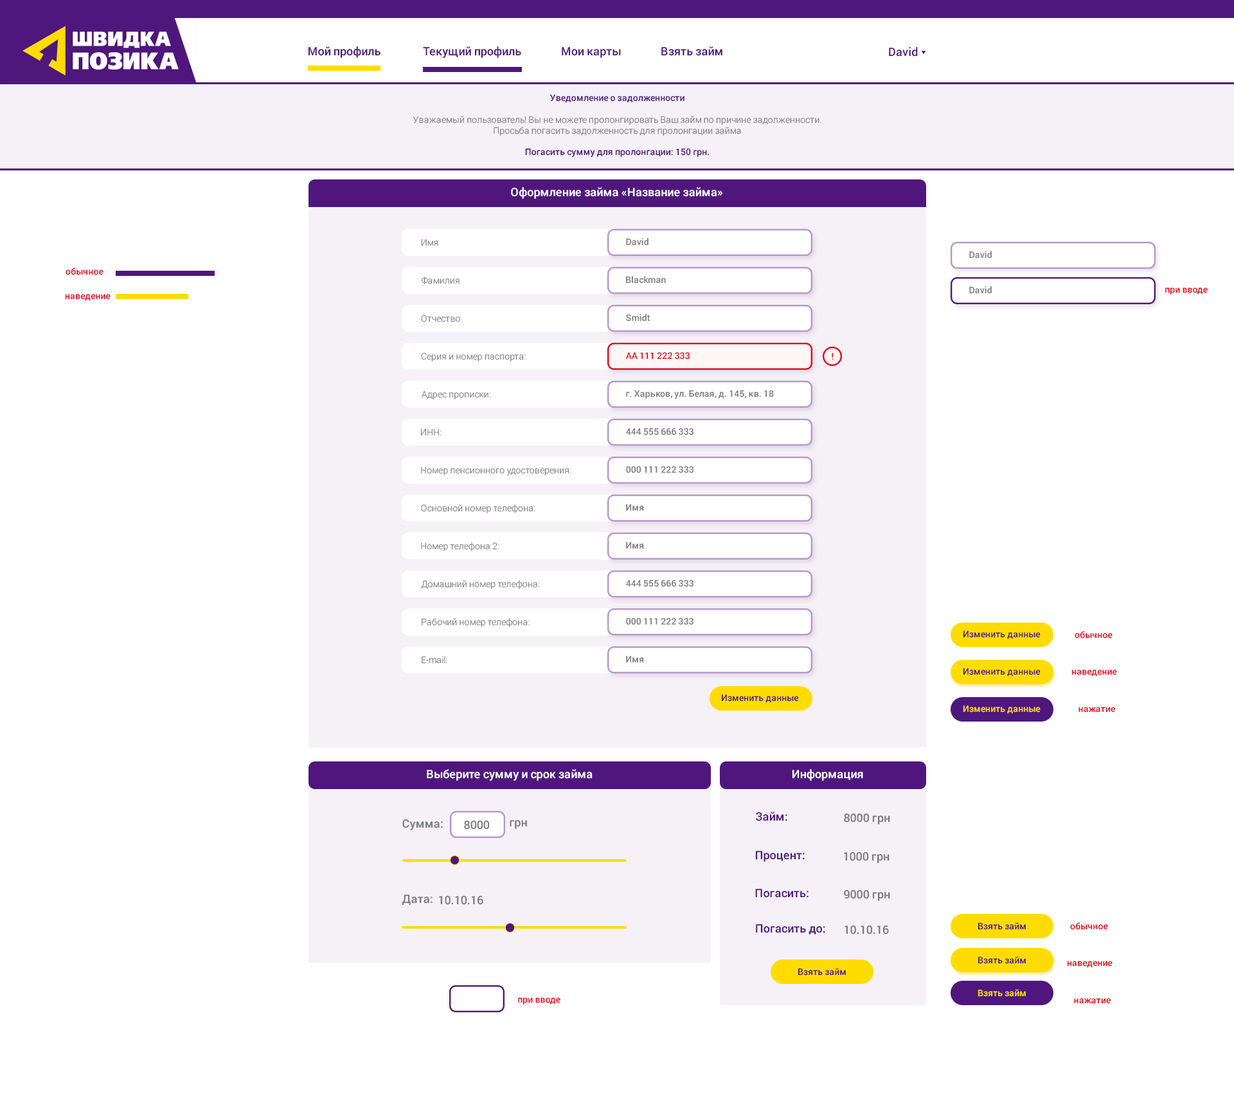
<style>
.page{position:relative;width:1234px;height:1101px;background:#ffffff}
.page>*{position:absolute;margin:0}
.t1{font:11.6px "Roboto-Medium";letter-spacing:0.005em;color:#4f177d}
.t2{font:9px "Roboto-Light";letter-spacing:0.005em;color:#7a7a7a}
.t3{font:9px "Roboto-Medium";letter-spacing:0.005em;color:#4f177d}
.t4{font:11.6px "Roboto-Medium";letter-spacing:0.005em;color:#ffffff}
.t5{font:9px "Roboto-Medium";letter-spacing:0.005em;color:#7a7a7a}
.t6{font:9px "Roboto-Medium";letter-spacing:0.005em;color:#e30613}
.t7{font:9px "Roboto-Medium";letter-spacing:0.005em;color:#ffdc00}
.t8{font:11.6px "Roboto-Medium";letter-spacing:0.005em;color:#7a7a7a}
</style>
<div class="page">
<p class="t1" style="left:308px;top:46px;width:415px;height:12px">Мой профиль                Текущий профиль               Мои карты               Взять займ</p>
<p class="t1" style="left:889px;top:47px;width:29px;height:10px">David</p>
<p class="t2" style="left:413px;top:94px;width:409px;height:64px;text-align:center"><span class="t3">Уведомление о задолженности<br></span><br>Уважаемый пользователь! Вы не можете пролонгировать Ваш займ по причине задолженности.<br>Просьба погасить задолженность для пролонгации займа<br><br><span class="t3">Погасить сумму для пролонгации: 150 грн.</span></p>
<p class="t4" style="left:511px;top:187px;width:212px;height:12px">Оформление займа «Название займа»</p>
<p class="t2" style="left:421px;top:239px;width:17px;height:7px">Имя</p>
<p class="t5" style="left:626px;top:238px;width:23px;height:8px">David</p>
<p class="t5" style="left:969px;top:251px;width:23px;height:7px">David</p>
<p class="t6" style="left:66px;top:267px;width:38px;height:8px">обычное</p>
<p class="t2" style="left:421px;top:276px;width:39px;height:8px">Фамилия</p>
<p class="t5" style="left:626px;top:276px;width:40px;height:8px">Blackman</p>
<p class="t6" style="left:65px;top:294px;width:46px;height:7px">наведение</p>
<p class="t5" style="left:969px;top:286px;width:23px;height:8px">David</p>
<p class="t6" style="left:1166px;top:287px;width:42px;height:7px">при вводе</p>
<p class="t2" style="left:421px;top:314px;width:39px;height:8px">Отчество</p>
<p class="t5" style="left:626px;top:314px;width:25px;height:7px">Smidt</p>
<p class="t2" style="left:421px;top:352px;width:105px;height:9px">Серия и номер паспорта:</p>
<p class="t6" style="left:626px;top:352px;width:64px;height:7px">AA 111 222 333</p>
<p class="t6" style="left:832px;top:352px;width:2px;height:8px">!</p>
<p class="t5" style="left:626px;top:390px;width:148px;height:9px">г. Харьков, ул. Белая, д. 145, кв. 18</p>
<p class="t2" style="left:422px;top:390px;width:69px;height:9px">Адрес прописки:</p>
<p class="t2" style="left:421px;top:428px;width:21px;height:8px">ИНН:</p>
<p class="t5" style="left:626px;top:428px;width:68px;height:7px">444 555 666 333</p>
<p class="t2" style="left:421px;top:466px;width:151px;height:10px">Номер пенсионного удостоверения:</p>
<p class="t5" style="left:626px;top:465px;width:68px;height:8px">000 111 222 333</p>
<p class="t2" style="left:421px;top:504px;width:115px;height:9px">Основной номер телефона:</p>
<p class="t5" style="left:626px;top:503px;width:18px;height:8px">Имя</p>
<p class="t2" style="left:421px;top:542px;width:79px;height:9px">Номер телефона 2:</p>
<p class="t5" style="left:626px;top:541px;width:18px;height:8px">Имя</p>
<p class="t2" style="left:421px;top:580px;width:119px;height:9px">Домашний номер телефона:</p>
<p class="t5" style="left:626px;top:579px;width:68px;height:8px">444 555 666 333</p>
<p class="t2" style="left:422px;top:618px;width:108px;height:9px">Рабочий номер телефона:</p>
<p class="t5" style="left:626px;top:617px;width:68px;height:8px">000 111 222 333</p>
<p class="t3" style="left:963px;top:630px;width:78px;height:9px">Изменить данные</p>
<p class="t6" style="left:1075px;top:631px;width:38px;height:7px">обычное</p>
<p class="t2" style="left:422px;top:656px;width:25px;height:7px">E-mail:</p>
<p class="t5" style="left:626px;top:655px;width:18px;height:8px">Имя</p>
<p class="t3" style="left:963px;top:667px;width:78px;height:9px">Изменить данные</p>
<p class="t6" style="left:1072px;top:669px;width:45px;height:7px">наведение</p>
<p class="t3" style="left:721px;top:694px;width:78px;height:9px">Изменить данные</p>
<p class="t7" style="left:963px;top:705px;width:78px;height:9px">Изменить данные</p>
<p class="t6" style="left:1079px;top:706px;width:37px;height:6px">нажатие</p>
<p class="t4" style="left:427px;top:769px;width:166px;height:11px">Выберите сумму и срок займа</p>
<p class="t4" style="left:792px;top:769px;width:71px;height:11px">Информация</p>
<p class="t8" style="left:402px;top:818px;width:41px;height:12px">Сумма:</p>
<p class="t8" style="left:464px;top:820px;width:26px;height:9px">8000</p>
<p class="t8" style="left:510px;top:820px;width:17px;height:9px">грн</p>
<p class="t1" style="left:756px;top:811px;width:32px;height:10px">Займ:</p>
<p class="t8" style="left:844px;top:813px;width:46px;height:11px">8000 грн</p>
<p class="t1" style="left:755px;top:851px;width:50px;height:10px">Процент:</p>
<p class="t8" style="left:844px;top:851px;width:46px;height:12px">1000 грн</p>
<p class="t1" style="left:755px;top:888px;width:54px;height:9px">Погасить:</p>
<p class="t8" style="left:844px;top:889px;width:46px;height:12px">9000 грн</p>
<p class="t8" style="left:402px;top:894px;width:31px;height:11px">Дата:</p>
<p class="t8" style="left:439px;top:895px;width:44px;height:10px">10.10.16</p>
<p class="t1" style="left:756px;top:924px;width:69px;height:10px">Погасить до:</p>
<p class="t8" style="left:845px;top:924px;width:44px;height:10px">10.10.16</p>
<p class="t3" style="left:978px;top:922px;width:48px;height:8px">Взять займ</p>
<p class="t6" style="left:1070px;top:922px;width:38px;height:8px">обычное</p>
<p class="t3" style="left:978px;top:956px;width:48px;height:8px">Взять займ</p>
<p class="t6" style="left:1067px;top:960px;width:46px;height:8px">наведение</p>
<p class="t3" style="left:798px;top:968px;width:48px;height:7px">Взять займ</p>
<p class="t7" style="left:978px;top:989px;width:48px;height:7px">Взять займ</p>
<p class="t6" style="left:518px;top:997px;width:43px;height:7px">при вводе</p>
<p class="t6" style="left:1074px;top:998px;width:38px;height:6px">нажатие</p>
</div>
